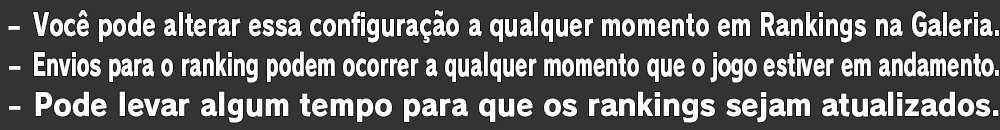
<style>
.page{position:relative;width:1000px;height:130px;background:#333333}
.page>*{position:absolute;margin:0}
.t1{font:30.7px "RodinPro-EB";color:#fffeff;scale:0.72 1}
.t2{font:30.7px "RodinPro-EB";color:#fffeff;scale:0.64 1}
.t3{font:30.7px "RodinPro-EB";color:#fffeff;scale:0.92 1}
</style>
<div class="page">
<p class="t1" style="left:33px;top:10px;width:966px;height:33px">Você pode alterar essa configuração a qualquer momento em Rankings na Galeria.</p>
<p class="t2" style="left:34px;top:51px;width:965px;height:32px">Envios para o ranking podem ocorrer a qualquer momento que o jogo estiver em andamento.</p>
<p class="t3" style="left:35px;top:91px;width:964px;height:32px">Pode levar algum tempo para que os rankings sejam atualizados.</p>
</div>
